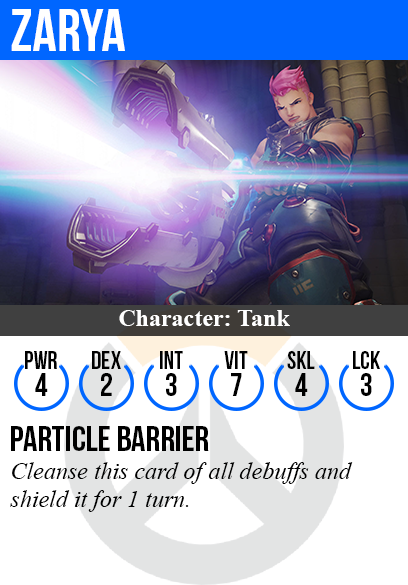
<style>
.page{position:relative;width:408px;height:585px;background:#ffffff}
.page>*{position:absolute;margin:0}
.t1{font:60px "BebasNeue";color:#ffffff}
.t2{font:24px "TimesNewRomanPS-BoldMT";color:#ffffff}
.t3{font:25px "BebasNeue";color:#000000}
.t4{font:32px "BebasNeue";color:#000000}
.t5{font:36px "BebasNeue";color:#000000}
.t6{font:24px "TimesNewRomanPS-ItalicMT";color:#000000}
</style>
<div class="page">
<p class="t1" style="left:11px;top:9px;width:114px;height:42px">zarya</p>
<p class="t2" style="left:119px;top:310px;width:171px;height:16px">Character: Tank</p>
<p class="t3" style="left:25px;top:351px;width:32px;height:18px">PWR</p>
<p class="t3" style="left:92px;top:351px;width:29px;height:18px">dex</p>
<p class="t3" style="left:160px;top:351px;width:23px;height:18px">int</p>
<p class="t3" style="left:224px;top:351px;width:24px;height:18px">vit</p>
<p class="t3" style="left:287px;top:351px;width:28px;height:18px">skl</p>
<p class="t3" style="left:353px;top:351px;width:27px;height:18px">lck</p>
<p class="t4" style="left:35px;top:373px;width:13px;height:23px">4</p>
<p class="t4" style="left:101px;top:373px;width:11px;height:23px">2</p>
<p class="t4" style="left:166px;top:373px;width:11px;height:23px">3</p>
<p class="t4" style="left:231px;top:373px;width:11px;height:23px">7</p>
<p class="t4" style="left:295px;top:373px;width:13px;height:23px">4</p>
<p class="t4" style="left:361px;top:373px;width:11px;height:23px">3</p>
<p class="t5" style="left:11px;top:426px;width:198px;height:25px">particle barrier</p>
<p class="t6" style="left:10px;top:462px;width:343px;height:50px">Cleanse this card of all debuffs and<br>shield it for 1 turn.</p>
</div>
